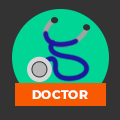
<style>
.page{position:relative;width:120px;height:120px;background:#333333}
.page>*{position:absolute;margin:0}
.t1{font:12.5px "Montserrat-Bold";letter-spacing:0.03em;color:#ffffff}
</style>
<div class="page">
<p class="t1" style="left:32px;top:90px;width:56px;height:9px">DOCTOR</p>
</div>
